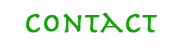
<style>
.page{position:relative;width:180px;height:50px;background:#ffffff}
.page>*{position:absolute;margin:0}
.t1{font:30px "Herculanum";color:#14a405;font-weight:bold}
</style>
<div class="page">
<p class="t1" style="left:26px;top:13px;width:131px;height:20px">Contact</p>
</div>
